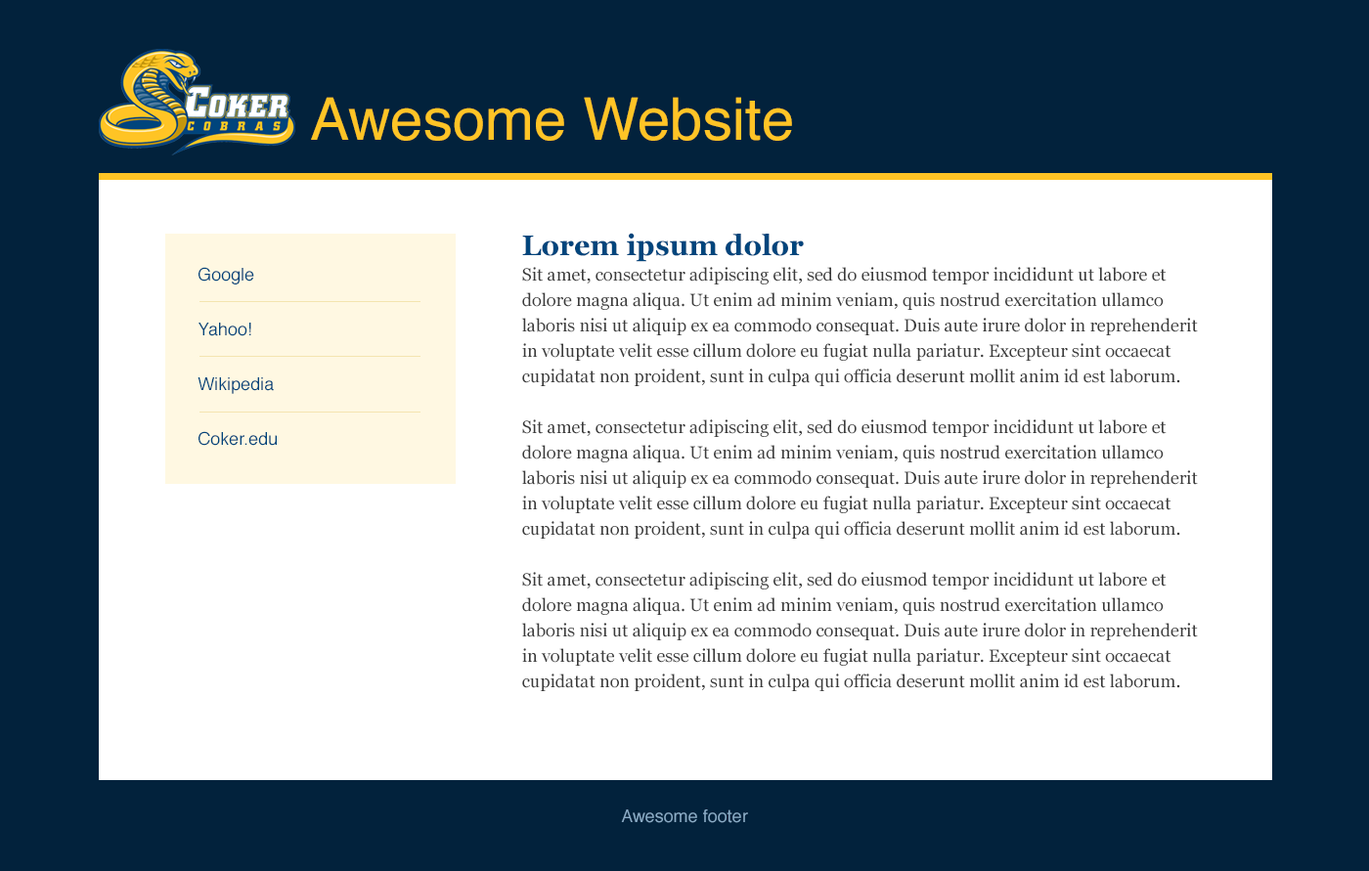
<style>
.page{position:relative;width:1369px;height:871px;background:#ffffff}
.page>*{position:absolute;margin:0}
.t1{font:58.7px "Helvetica";color:#ffc426}
.t2{font:17.6px/25.4px "Georgia";color:#3b3b3b}
.t3{font:28.4px/25.4px "Georgia-Bold";color:#00457c}
.t4{font:17.6px/27.4px "Helvetica";color:#00457c}
.t5{font:17.6px "Helvetica";color:#8badc8}
</style>
<div class="page">
<p class="t1" style="left:311px;top:97px;width:481px;height:44px">Awesome Website</p>
<p class="t2" style="left:521px;top:233px;width:677px;height:458px"><span class="t3">Lorem ipsum dolor <br></span>Sit amet, consectetur adipiscing elit, sed do eiusmod tempor incididunt ut labore et dolore magna aliqua. Ut enim ad minim veniam, quis nostrud exercitation ullamco laboris nisi ut aliquip ex ea commodo consequat. Duis aute irure dolor in reprehenderit in voluptate velit esse cillum dolore eu fugiat nulla pariatur. Excepteur sint occaecat cupidatat non proident, sunt in culpa qui officia deserunt mollit anim id est laborum.<br><br>Sit amet, consectetur adipiscing elit, sed do eiusmod tempor incididunt ut labore et dolore magna aliqua. Ut enim ad minim veniam, quis nostrud exercitation ullamco laboris nisi ut aliquip ex ea commodo consequat. Duis aute irure dolor in reprehenderit in voluptate velit esse cillum dolore eu fugiat nulla pariatur. Excepteur sint occaecat cupidatat non proident, sunt in culpa qui officia deserunt mollit anim id est laborum.<br><br>Sit amet, consectetur adipiscing elit, sed do eiusmod tempor incididunt ut labore et dolore magna aliqua. Ut enim ad minim veniam, quis nostrud exercitation ullamco laboris nisi ut aliquip ex ea commodo consequat. Duis aute irure dolor in reprehenderit in voluptate velit esse cillum dolore eu fugiat nulla pariatur. Excepteur sint occaecat cupidatat non proident, sunt in culpa qui officia deserunt mollit anim id est laborum.</p>
<p class="t4" style="left:197px;top:267px;width:80px;height:179px">Google<br><br>Yahoo!<br><br>Wikipedia<br><br>Coker.edu</p>
<p class="t5" style="left:621px;top:810px;width:127px;height:13px">Awesome footer</p>
</div>
